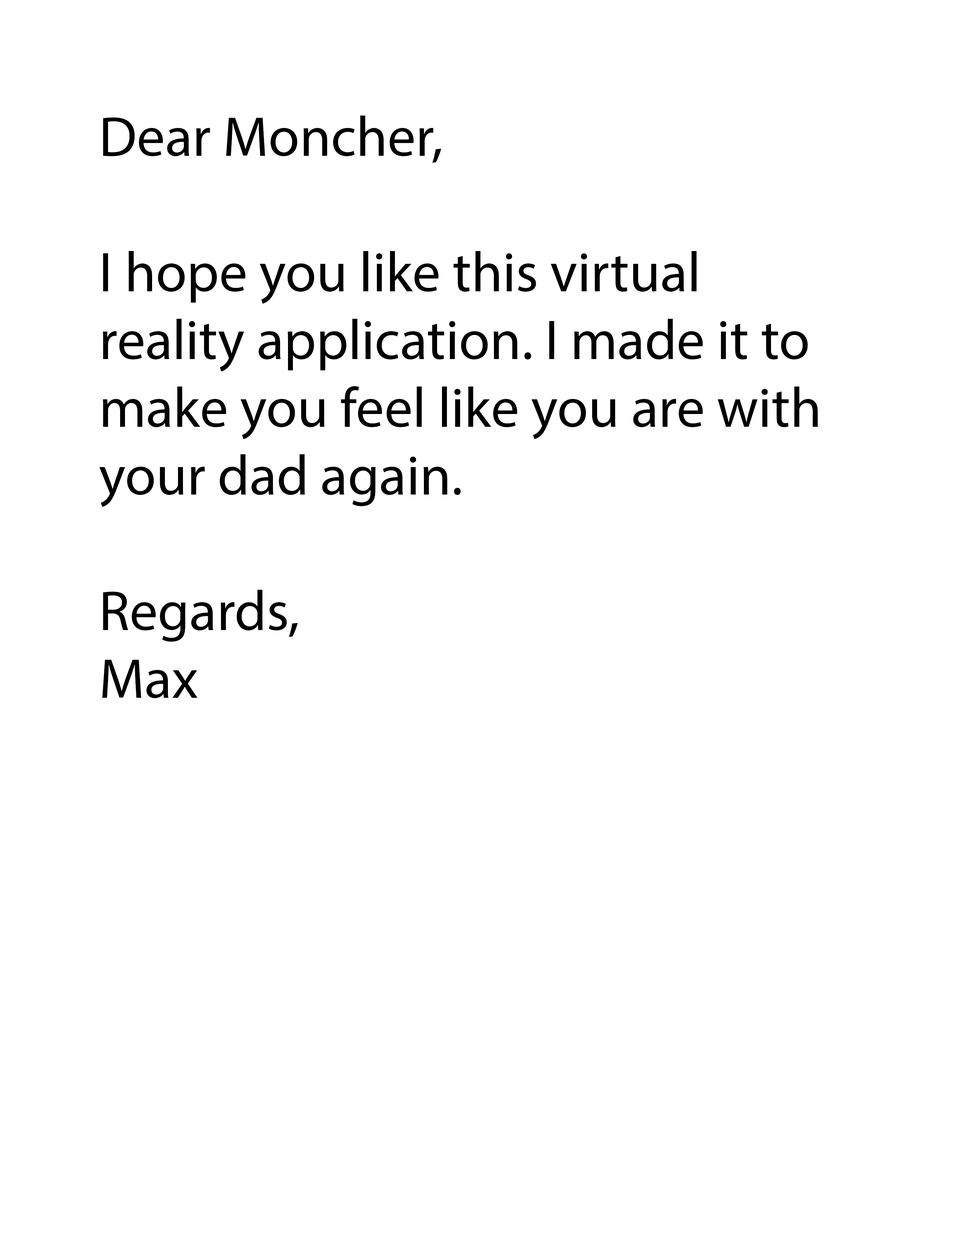
<style>
.page{position:relative;width:960px;height:1242px;background:#ffffff}
.page>*{position:absolute;margin:0}
.t1{font:56.5px "MyriadPro-Regular";color:#000000}
</style>
<div class="page">
<p class="t1" style="left:99px;top:116px;width:719px;height:582px">Dear Moncher,<br><br>I hope you like this virtual reality application. I made it to make you feel like you are with your dad again.<br><br>Regards,<br>Max</p>
</div>
